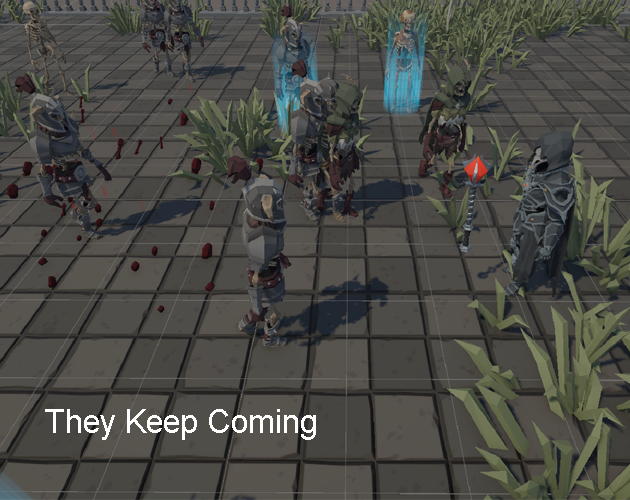
<style>
.page{position:relative;width:630px;height:500px}
.page>*{position:absolute;margin:0}
.t1{font:33.3px "ArialMT";color:#fefefe}
</style>
<div class="page">
<p class="t1" style="left:45px;top:409px;width:271px;height:31px">They Keep Coming</p>
</div>
